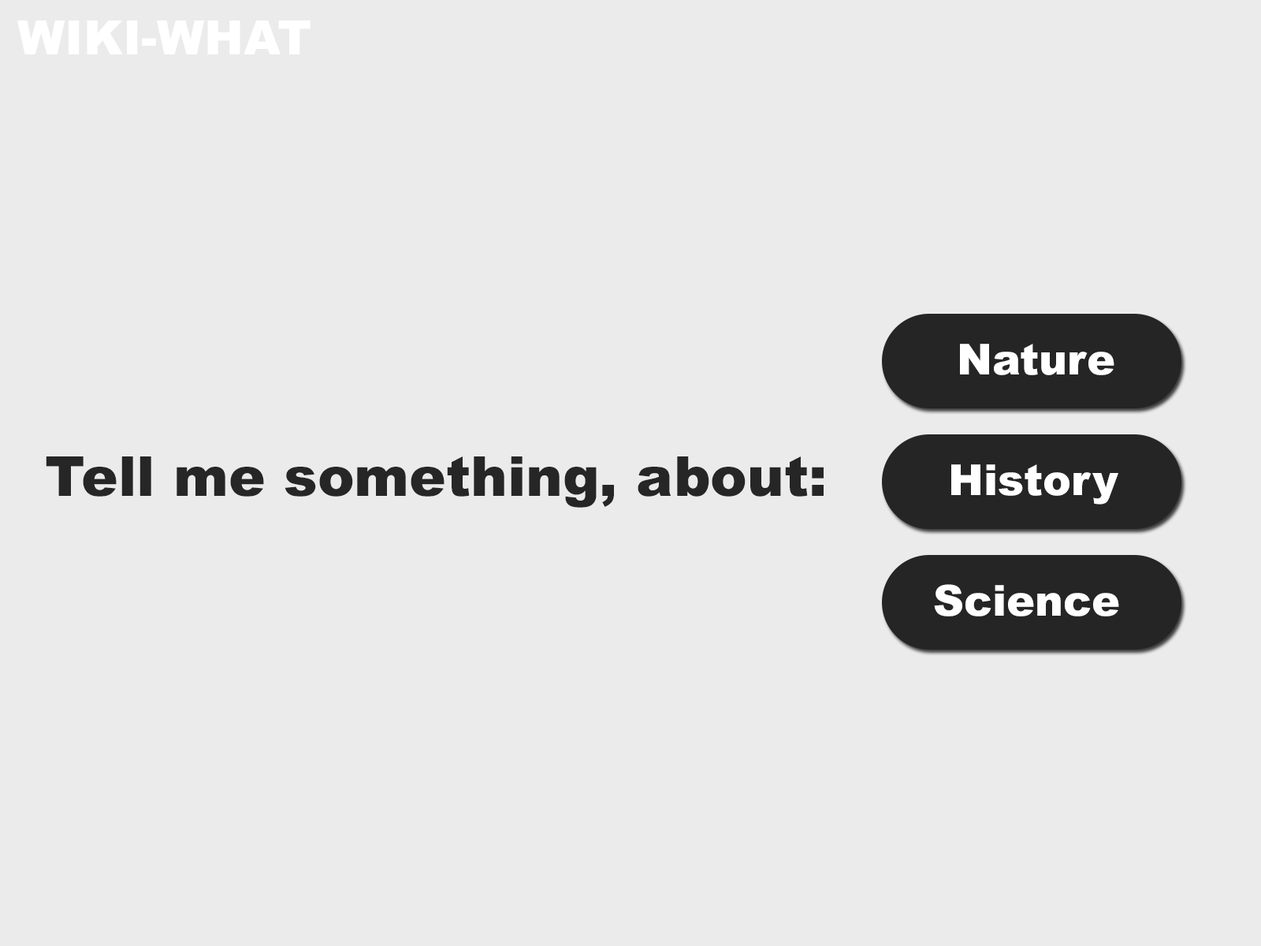
<style>
.page{position:relative;width:1261px;height:946px;background:#ebebeb}
.page>*{position:absolute;margin:0}
.t1{font:47.3px "Arial-Black";color:#ffffff}
.t2{font:42.6px "Arial-Black";color:#ffffff}
.t3{font:55.2px "Arial-Black";color:#262626}
</style>
<div class="page">
<p class="t1" style="left:17px;top:20px;width:294px;height:34px">WIKI-WHAT</p>
<p class="t2" style="left:960px;top:344px;width:154px;height:31px">Nature</p>
<p class="t3" style="left:46px;top:456px;width:778px;height:52px">Tell me something, about:</p>
<p class="t2" style="left:951px;top:464px;width:167px;height:40px">History</p>
<p class="t2" style="left:934px;top:584px;width:185px;height:32px">Science</p>
</div>
